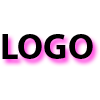
<style>
.page{position:relative;width:100px;height:100px;background:#ffffff}
.page>*{position:absolute;margin:0}
.t1{font:36px "MyriadPro-Bold";color:#000000}
</style>
<div class="page">
<p class="t1" style="left:2px;top:34px;width:91px;height:25px">LOGO</p>
</div>
